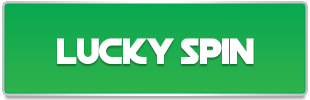
<style>
.page{position:relative;width:310px;height:100px}
.page>*{position:absolute;margin:0}
.t1{font:36px "DeathStar";color:#ffffff}
</style>
<div class="page">
<p class="t1" style="left:57px;top:38px;width:197px;height:26px">lucky spin</p>
</div>
